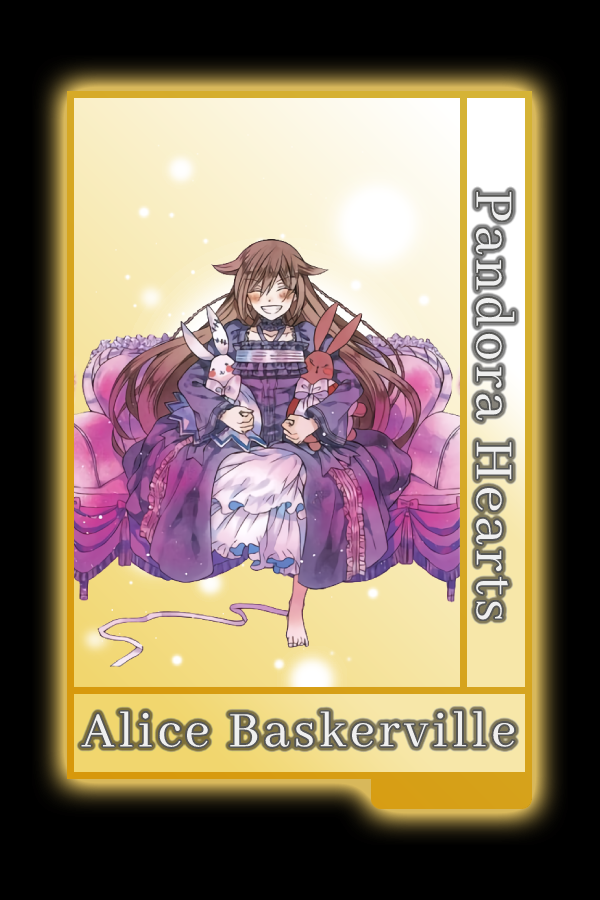
<style>
.page{position:relative;width:600px;height:900px;background:#000000}
.page>*{position:absolute;margin:0}
.t1{font:59.1px "AbhayaLibre-Regular";letter-spacing:0.072em;color:#efefef}
.t2{font:55px "AbhayaLibre-Regular";letter-spacing:0.072em;color:#efefef}
</style>
<div class="page">
<p class="t1" style="left:476px;top:192px;width:39px;height:428px;rotate:90deg">Pandora Hearts</p>
<p class="t2" style="left:81px;top:711px;width:434px;height:36px">Alice Baskerville</p>
</div>
